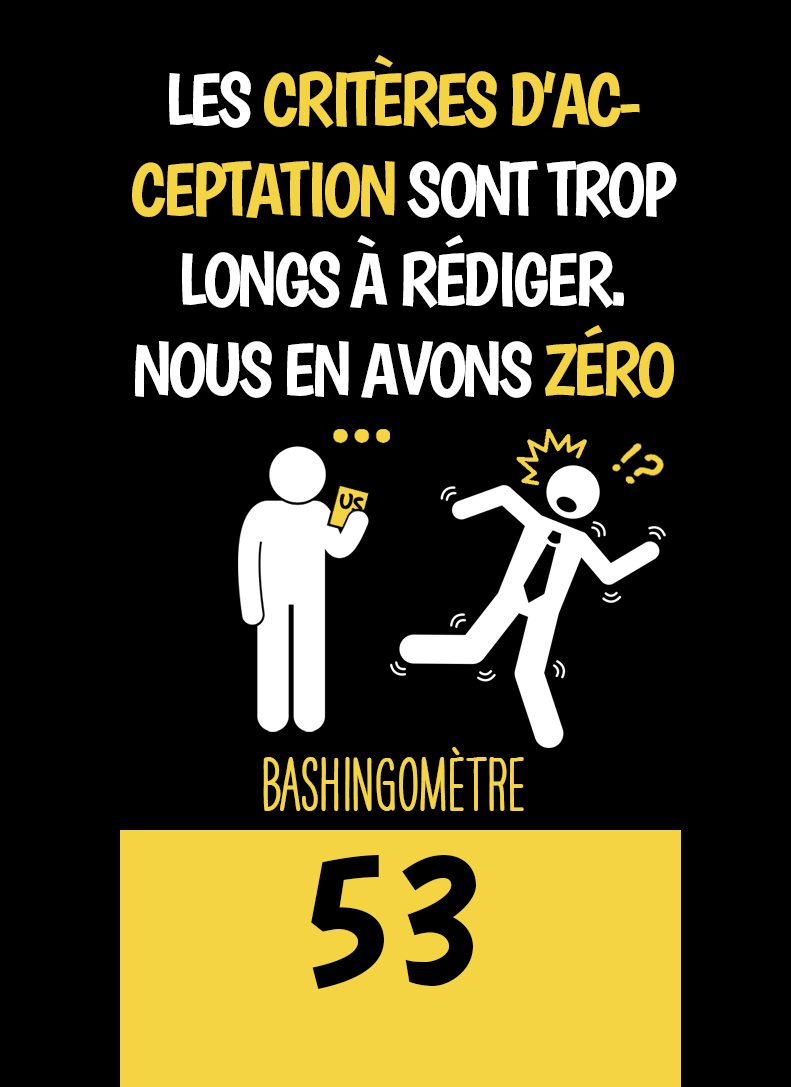
<style>
.page{position:relative;width:791px;height:1087px;background:#000000}
.page>*{position:absolute;margin:0}
.t1{font:75px "Boogaloo-Regular";letter-spacing:-0.06em;color:#ffffff}
.t2{font:75px "Boogaloo-Regular";letter-spacing:-0.06em;color:#f4d443}
.t3{font:66.7px "HAVEANICEDAYTallW04-Bold";color:#f4d443}
.t4{font:200px "Boogaloo-Regular";color:#000000}
</style>
<div class="page">
<p class="t1" style="left:132px;top:55px;width:545px;height:343px;text-align:center">LES <span class="t2">CRITÈRES D’ACCEPTATION </span>SONT TROP LONGS À RÉDIGER. NOUS EN AVONS <span class="t2">ZÉRO</span></p>
<p class="t3" style="left:263px;top:747px;width:261px;height:64px">BASHINgomètre</p>
<p class="t4" style="left:311px;top:855px;width:165px;height:134px">53</p>
</div>
